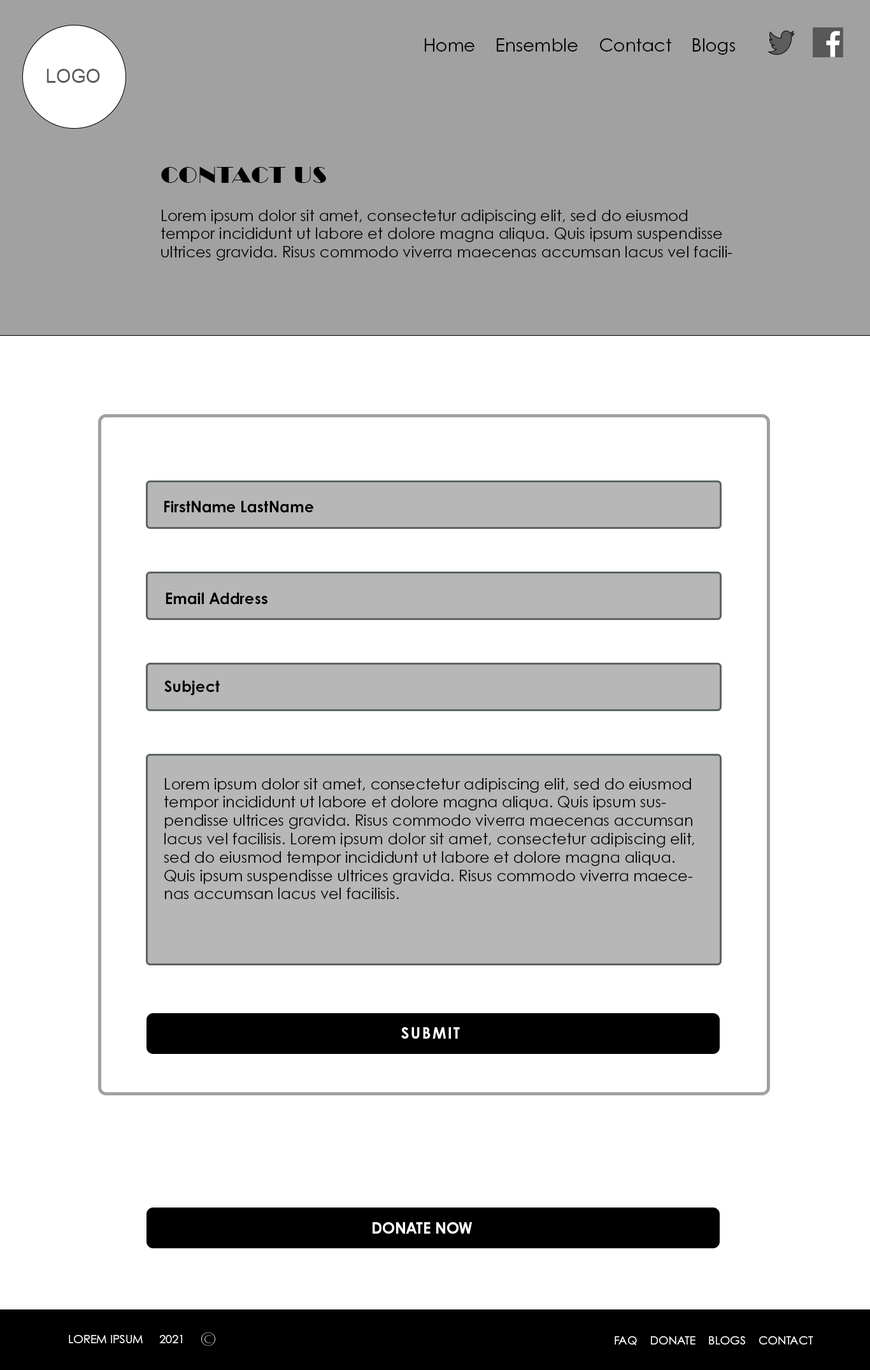
<style>
.page{position:relative;width:870px;height:1370px;background:#ffffff}
.page>*{position:absolute;margin:0}
.t1{font:17.8px "CenturyGothicPro";color:#000000}
.t2{font:19.1px "ArialMT";color:#5f5c5c}
.t3{font:22.9px "LTCBroadway-Regular";color:#010101}
.t4{font:15.3px "CenturyGothicPro";color:#010101}
.t5{font:15.3px "CenturyGothicPro-Bold";color:#000000}
.t6{font:15.3px "CenturyGothicPro";color:#000000}
.t7{font:15.3px "CenturyGothicPro-Bold";letter-spacing:0.1em;color:#ffffff}
.t8{font:15.3px "CenturyGothicPro-Bold";color:#ffffff}
.t9{font:11.5px "CenturyGothicPro";color:#ffffff}
</style>
<div class="page">
<p class="t1" style="left:425px;top:38px;width:311px;height:17px">Home    Ensemble    Contact    Blogs</p>
<p class="t2" style="left:47px;top:69px;width:53px;height:14px">LOGO</p>
<p class="t3" style="left:161px;top:167px;width:165px;height:16px">CONTACT US</p>
<p class="t4" style="left:161px;top:210px;width:572px;height:51px">Lorem ipsum dolor sit amet, consectetur adipiscing elit, sed do eiusmod tempor incididunt ut labore et dolore magna aliqua. Quis ipsum suspendisse ultrices gravida. Risus commodo viverra maecenas accumsan lacus vel facilisis.</p>
<p class="t5" style="left:164px;top:501px;width:149px;height:12px">FirstName LastName</p>
<p class="t5" style="left:166px;top:593px;width:102px;height:12px">Email Address</p>
<p class="t5" style="left:164px;top:681px;width:56px;height:14px">Subject</p>
<p class="t6" style="left:164px;top:778px;width:531px;height:121px">Lorem ipsum dolor sit amet, consectetur adipiscing elit, sed do eiusmod tempor incididunt ut labore et dolore magna aliqua. Quis ipsum suspendisse ultrices gravida. Risus commodo viverra maecenas accumsan lacus vel facilisis. Lorem ipsum dolor sit amet, consectetur adipiscing elit, sed do eiusmod tempor incididunt ut labore et dolore magna aliqua. Quis ipsum suspendisse ultrices gravida. Risus commodo viverra maecenas accumsan lacus vel facilisis.</p>
<p class="t7" style="left:401px;top:1027px;width:59px;height:12px">SUBMIT</p>
<p class="t8" style="left:373px;top:1222px;width:99px;height:12px">DONATE NOW</p>
<p class="t9" style="left:69px;top:1335px;width:113px;height:8px">LOREM IPSUM     2021</p>
<p class="t9" style="left:615px;top:1336px;width:199px;height:9px">FAQ    DONATE    BLOGS    CONTACT</p>
</div>
